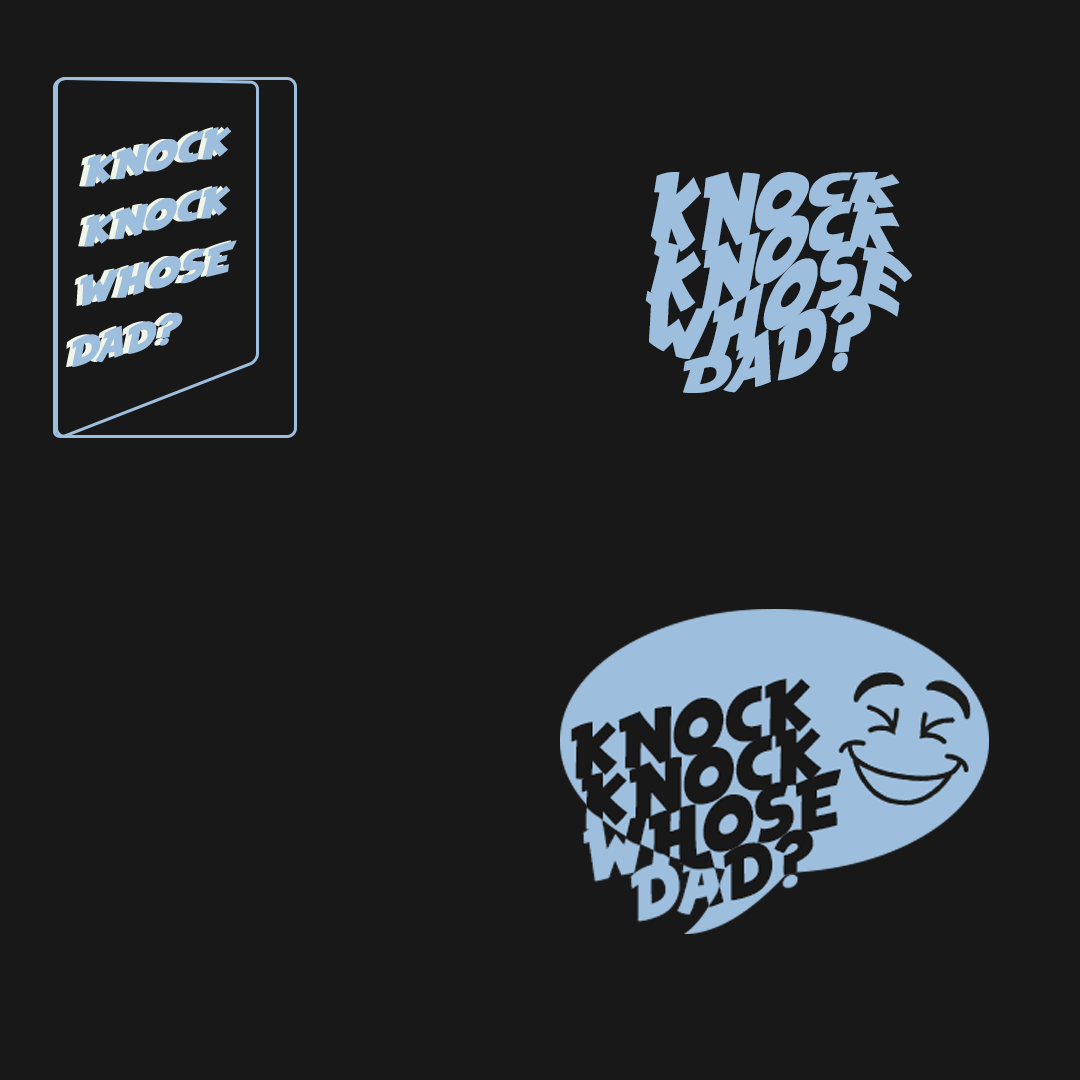
<style>
.page{position:relative;width:1080px;height:1080px;background:#191818}
.page>*{position:absolute;margin:0}
.t1{font:43.1px "HeroesLegend";color:#9dbedc}
</style>
<div class="page">
<p class="t1" style="left:645px;top:172px;width:267px;height:221px;text-align:center">KNOCK<br>KNOCK<br>WHOSE<br>DAD?</p>
</div>
